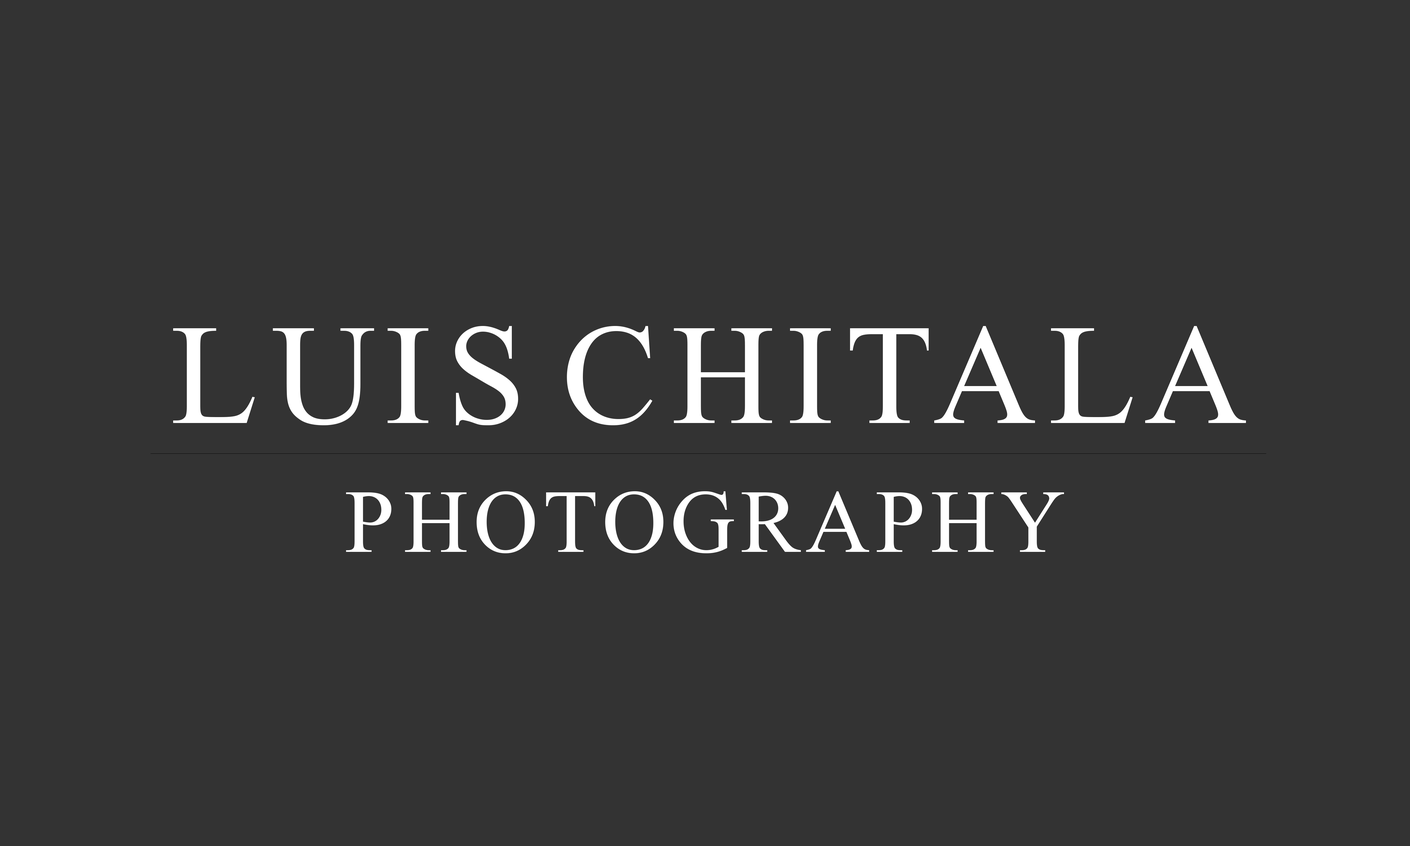
<style>
.page{position:relative;width:1410px;height:846px;background:#333333}
.page>*{position:absolute;margin:0}
.t1{font:143.2px "MongolianBaiti";color:#ffffff}
.t2{font:89.5px "MongolianBaiti";color:#ffffff}
</style>
<div class="page">
<p class="t1" style="left:173px;top:326px;width:1073px;height:227px;text-align:center">LUIS CHITALA<br><span class="t2">PHOTOGRAPHY</span></p>
</div>
